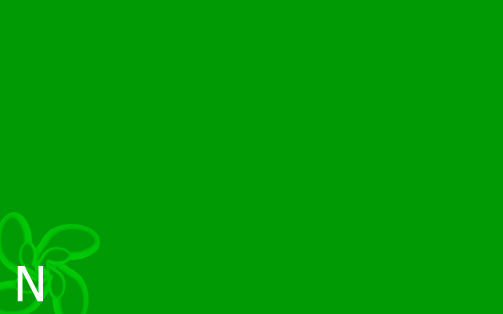
<style>
.page{position:relative;width:503px;height:314px;background:#009a04}
.page>*{position:absolute;margin:0}
.t1{font:48px "Tahoma";color:#ffffff}
</style>
<div class="page">
<p class="t1" style="left:17px;top:266px;width:26px;height:36px">N</p>
</div>
